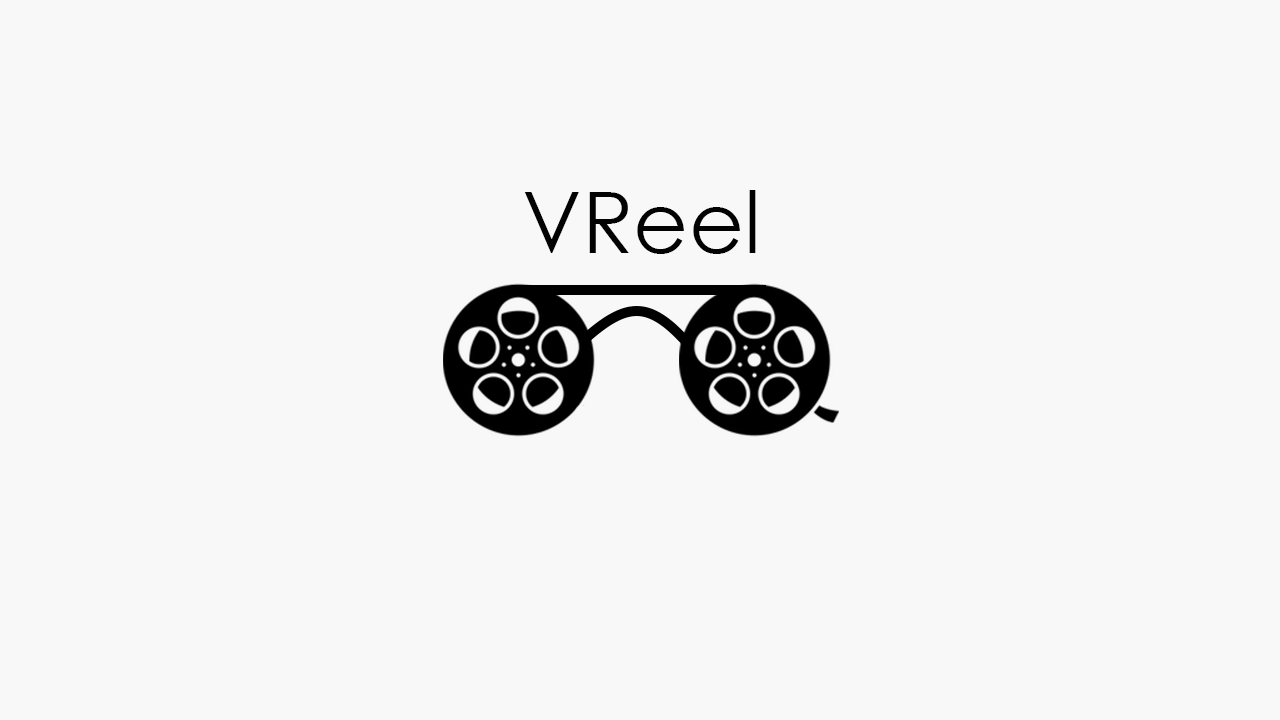
<style>
.page{position:relative;width:1280px;height:720px;background:#f8f8f8}
.page>*{position:absolute;margin:0}
.t1{font:85px "CenturyGothic";color:#020202}
</style>
<div class="page">
<p class="t1" style="left:524px;top:190px;width:232px;height:64px">VReel</p>
</div>
